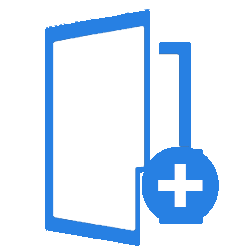
<style>
.page{position:relative;width:250px;height:250px;background:#ffffff}
.page>*{position:absolute;margin:0}
.t1{font:90.1px "CenturyGothic-Bold";color:#ffffff}
</style>
<div class="page">
<p class="t1" style="left:158px;top:164px;width:45px;height:43px">+</p>
</div>
